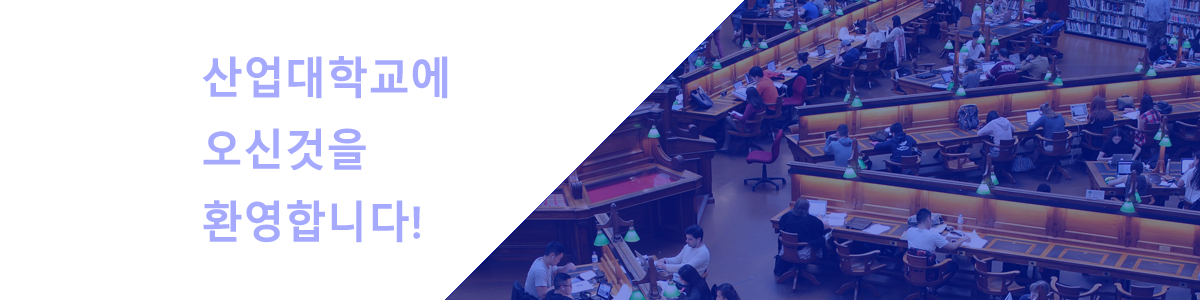
<style>
.page{position:relative;width:1200px;height:300px;background:#ffffff}
.page>*{position:absolute;margin:0}
.t1{font:44.1px/72px "MalgunGothicBold";color:#a6aaff;scale:0.95 1}
</style>
<div class="page">
<p class="t1" style="left:202px;top:56px;width:246px;height:187px">산업대학교에<br>오신것을<br>환영합니다!</p>
</div>
